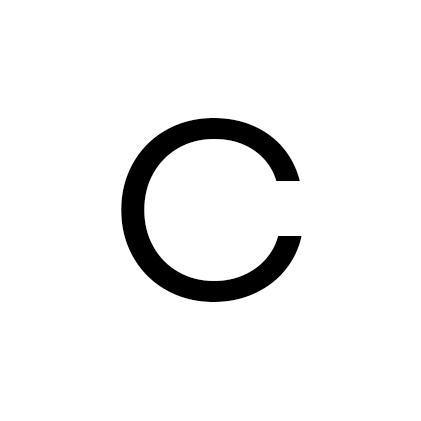
<style>
.page{position:relative;width:421px;height:421px;background:#ffffff}
.page>*{position:absolute;margin:0}
.t1{font:220px "GmarketSansTTFMedium";color:#000000}
</style>
<div class="page">
<p class="t1" style="left:121px;top:118px;width:181px;height:184px">C</p>
</div>
